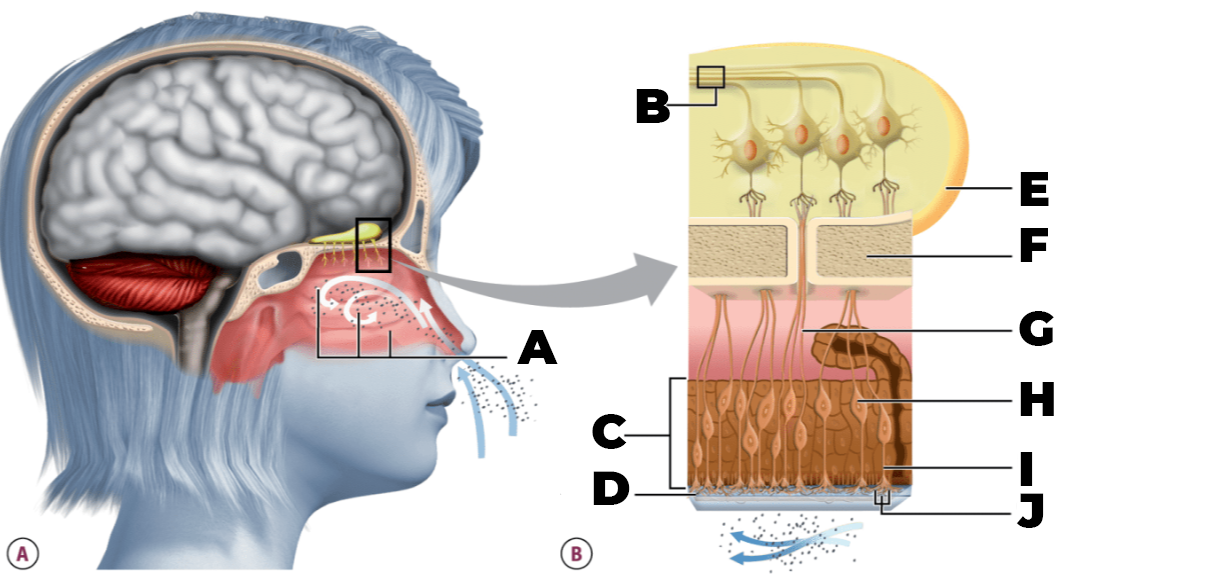
<style>
.page{position:relative;width:1221px;height:580px;background:#ffffff}
.page>*{position:absolute;margin:0}
.t1{font:48px "Montserrat-Black";color:#000000}
.t2{font:48px/14px "Montserrat-Black";color:#000000}
</style>
<div class="page">
<p class="t1" style="left:636px;top:89px;width:34px;height:34px">B</p>
<p class="t2" style="left:1016px;top:172px;width:38px;height:356px">E<br><br><br><br>F<br><br><br><br><br><br>G<br><br><br><br><br>H<br><br><br><br><br>I<br><br><br>J</p>
<p class="t1" style="left:517px;top:330px;width:41px;height:34px">A</p>
<p class="t2" style="left:592px;top:414px;width:38px;height:91px">C<br><br><br><br>D</p>
</div>
